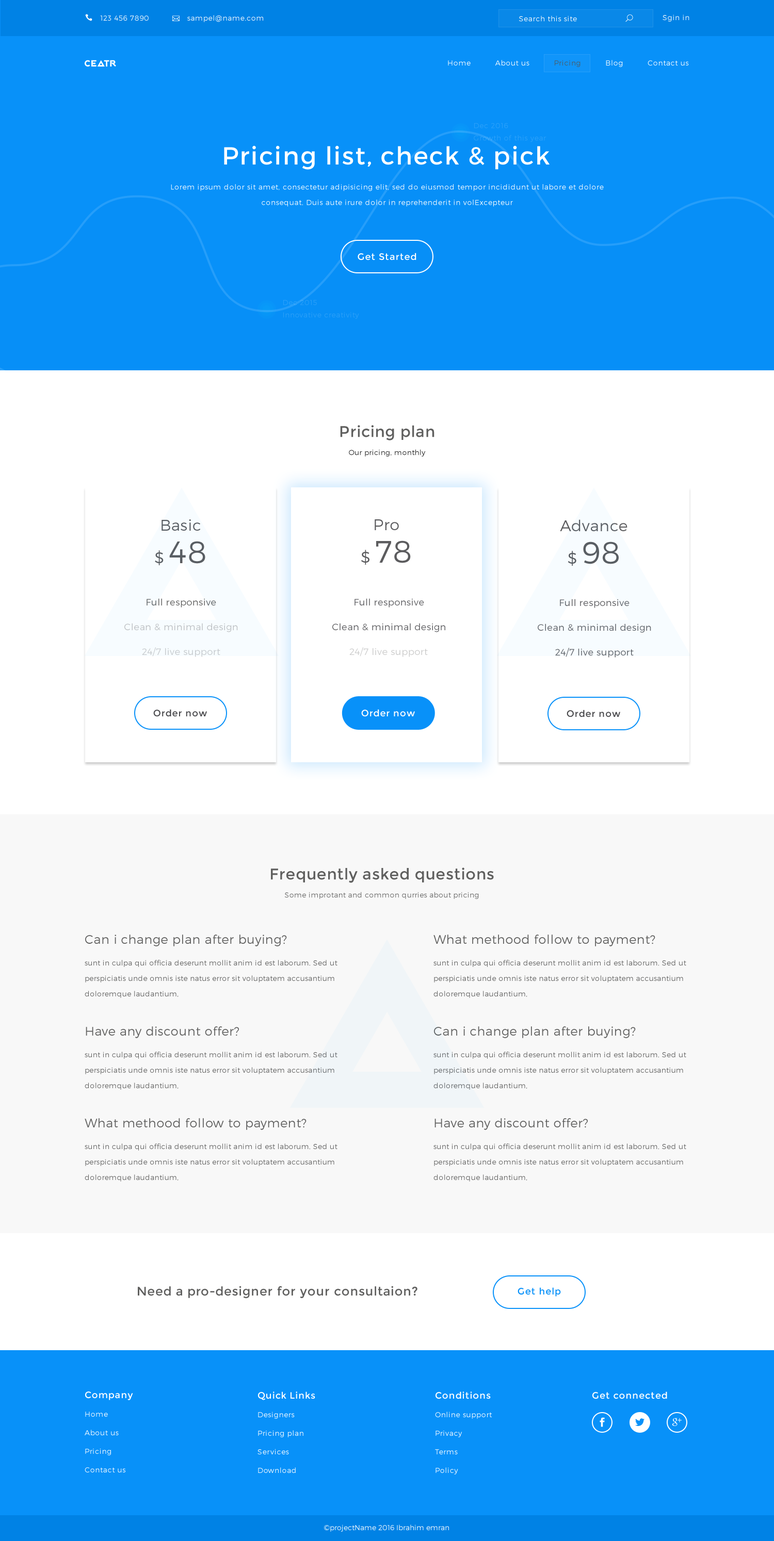
<style>
.page{position:relative;width:774px;height:1541px;background:#ffffff}
.page>*{position:absolute;margin:0}
.t1{font:7.2px "Montserrat-Light";letter-spacing:0.05em;color:#ffffff}
.t2{font:7.2px "ElegantIcons";letter-spacing:0.05em;color:#ffffff}
.t3{font:9.3px "JackFrost";letter-spacing:0.05em;color:#ffffff}
.t4{font:7.2px "Montserrat-Light";letter-spacing:0.05em;color:#fefefe}
.t5{font:7.2px "Montserrat-Light";letter-spacing:0.05em;color:#4e4e4d}
.t6{font:7.2px/12.4px "Montserrat-Light";letter-spacing:0.05em;color:#2da1fa}
.t7{font:24.8px "Montserrat-Regular";letter-spacing:0.05em;color:#ffffff}
.t8{font:7.2px/15.5px "Montserrat-Light";letter-spacing:0.05em;color:#ffffff}
.t9{font:9.3px "Montserrat-Regular";letter-spacing:0.05em;color:#ffffff}
.t10{font:7.2px/12.4px "Montserrat-Light";letter-spacing:0.05em;color:#2ca0f8}
.t11{font:15.5px "Montserrat-Regular";letter-spacing:0.025em;color:#4e4e4d}
.t12{font:7.2px "Montserrat-Light";letter-spacing:0.025em;color:#212121}
.t13{font:15.5px/32.5px "Montserrat-Light";letter-spacing:0.025em;color:#4a4a4d}
.t14{font:30.9px/32.5px "Montserrat-Light";letter-spacing:0.025em;color:#4a4a4d}
.t15{font:9.3px "Montserrat-Light";letter-spacing:0.025em;color:#656564}
.t16{font:9.3px/24.8px "Montserrat-Light";letter-spacing:0.025em;color:#4a4a4d}
.t17{font:9.3px/24.8px "Montserrat-Light";letter-spacing:0.025em;color:#5e6369}
.t18{font:9.3px "Montserrat-Light";letter-spacing:0.025em;color:#bec1c4}
.t19{font:9.3px "Montserrat-Light";letter-spacing:0.025em;color:#c6cacd}
.t20{font:9.3px "Montserrat-Light";letter-spacing:0.025em;color:#cccccc}
.t21{font:9.3px "Montserrat-Regular";letter-spacing:0.05em;color:#4a4a4d}
.t22{font:7.2px "Montserrat-Light";letter-spacing:0.025em;color:#4e4e4d}
.t23{font:7.2px/15.5px "Montserrat-Light";letter-spacing:0.025em;color:#4e4e4d}
.t24{font:12.4px/6.2px "Montserrat-Light";letter-spacing:0.025em;color:#4e4e4d}
.t25{font:12.4px "Montserrat-Regular";letter-spacing:0.025em;color:#4e4e4d}
.t26{font:9.3px "Montserrat-Regular";letter-spacing:0.05em;color:#0891f9}
.t27{font:7.2px/18.6px "Montserrat-Light";letter-spacing:0.05em;color:#ffffff}
.t28{font:9.3px/12.4px "Montserrat-Regular";letter-spacing:0.05em;color:#ffffff}
.t29{font:7.2px/9.3px "Montserrat-Light";letter-spacing:0.05em;color:#ffffff}
.t30{font:7.2px "Montserrat-Light";color:#ffffff}
.t31{font:7.2px "MicrosoftPhagsPa";color:#ffffff}
</style>
<div class="page">
<p class="t1" style="left:519px;top:14px;width:114px;height:8px">Search this site                    <span class="t2">U</span></p>
<p class="t1" style="left:662px;top:14px;width:27px;height:8px">Sgin in</p>
<p class="t3" style="left:85px;top:60px;width:31px;height:7px">ceatr</p>
<p class="t1" style="left:448px;top:60px;width:241px;height:7px"><span class="t4">Home          About us          </span><span class="t5">Pricing</span>          Blog          Contact us</p>
<p class="t6" style="left:474px;top:123px;width:72px;height:19px">Dec 2016<br>Growth of this year</p>
<p class="t7" style="left:224px;top:145px;width:325px;height:25px">Pricing list, check &amp; pick</p>
<p class="t8" style="left:171px;top:184px;width:432px;height:23px;text-align:center">Lorem ipsum dolor sit amet, consectetur adipisicing elit, sed do eiusmod tempor incididunt ut labore et dolore  consequat. Duis aute irure dolor in reprehenderit in volExcepteur</p>
<p class="t9" style="left:357px;top:253px;width:59px;height:7px">Get Started</p>
<p class="t10" style="left:283px;top:300px;width:76px;height:19px">Dec 2015<br>Innovative creativity</p>
<p class="t11" style="left:340px;top:425px;width:94px;height:15px;opacity:0.9">Pricing plan</p>
<p class="t12" style="left:349px;top:449px;width:77px;height:7px">Our pricing, monthly</p>
<p class="t13" style="left:155px;top:519px;width:50px;height:46px;text-align:center;opacity:0.9">Basic<br>$ <span class="t14">48</span></p>
<p class="t13" style="left:361px;top:519px;width:50px;height:46px;text-align:center;opacity:0.9">Pro<br>$ <span class="t14">78</span></p>
<p class="t13" style="left:560px;top:519px;width:67px;height:47px;text-align:center;opacity:0.9">Advance<br>$ <span class="t14">98</span></p>
<p class="t15" style="left:146px;top:598px;width:70px;height:10px">Full responsive</p>
<p class="t16" style="left:332px;top:598px;width:113px;height:34px;text-align:center;opacity:0.87">Full responsive<br>Clean &amp; minimal design</p>
<p class="t17" style="left:537px;top:599px;width:114px;height:59px;text-align:center">Full responsive<br>Clean &amp; minimal design<br>24/7 live support</p>
<p class="t18" style="left:124px;top:623px;width:114px;height:9px">Clean &amp; minimal design</p>
<p class="t19" style="left:142px;top:647px;width:78px;height:10px">24/7 live support</p>
<p class="t20" style="left:349px;top:647px;width:79px;height:10px">24/7 live support</p>
<p class="t21" style="left:153px;top:709px;width:54px;height:8px">Order now</p>
<p class="t9" style="left:361px;top:709px;width:54px;height:8px">Order now</p>
<p class="t21" style="left:566px;top:710px;width:54px;height:7px">Order now</p>
<p class="t11" style="left:271px;top:868px;width:223px;height:15px;opacity:0.9">Frequently asked questions</p>
<p class="t22" style="left:285px;top:892px;width:194px;height:7px;opacity:0.87">Some improtant and common qurries about pricing</p>
<p class="t23" style="left:85px;top:935px;width:252px;height:63px;opacity:0.9"><span class="t24">Can i change plan after buying?<br><br></span>sunt in culpa qui officia deserunt mollit anim id est laborum. Sed ut <br>perspiciatis unde omnis iste natus error sit voluptatem accusantium<br>doloremque laudantium,</p>
<p class="t23" style="left:433px;top:935px;width:253px;height:63px;opacity:0.9"><span class="t24">What methood follow to payment?<br><br></span>sunt in culpa qui officia deserunt mollit anim id est laborum. Sed ut <br>perspiciatis unde omnis iste natus error sit voluptatem accusantium<br>doloremque laudantium,</p>
<p class="t23" style="left:85px;top:1026px;width:252px;height:64px;opacity:0.9"><span class="t24">Have any discount offer?<br><br></span>sunt in culpa qui officia deserunt mollit anim id est laborum. Sed ut <br>perspiciatis unde omnis iste natus error sit voluptatem accusantium<br>doloremque laudantium,</p>
<p class="t23" style="left:433px;top:1026px;width:253px;height:64px;opacity:0.9"><span class="t24">Can i change plan after buying?<br><br></span>sunt in culpa qui officia deserunt mollit anim id est laborum. Sed ut <br>perspiciatis unde omnis iste natus error sit voluptatem accusantium<br>doloremque laudantium,</p>
<p class="t23" style="left:85px;top:1118px;width:252px;height:64px;opacity:0.9"><span class="t24">What methood follow to payment?<br><br></span>sunt in culpa qui officia deserunt mollit anim id est laborum. Sed ut <br>perspiciatis unde omnis iste natus error sit voluptatem accusantium<br>doloremque laudantium,</p>
<p class="t23" style="left:433px;top:1118px;width:253px;height:64px;opacity:0.9"><span class="t24">Have any discount offer?<br><br></span>sunt in culpa qui officia deserunt mollit anim id est laborum. Sed ut <br>perspiciatis unde omnis iste natus error sit voluptatem accusantium<br>doloremque laudantium,</p>
<p class="t25" style="left:138px;top:1286px;width:279px;height:13px;opacity:0.9">Need a pro-designer for your consultaion?</p>
<p class="t26" style="left:517px;top:1287px;width:44px;height:10px">Get help</p>
<p class="t27" style="left:85px;top:1392px;width:48px;height:81px"><span class="t28">Company<br><br></span><span class="t29">Home<br></span>About us<br>Pricing<br>Contact us</p>
<p class="t27" style="left:257px;top:1392px;width:58px;height:81px"><span class="t28">Quick Links<br><br></span><span class="t29">Designers<br></span>Pricing plan<br>Services<br>Download</p>
<p class="t27" style="left:435px;top:1392px;width:57px;height:83px"><span class="t28">Conditions<br><br></span><span class="t29">Online support<br></span>Privacy<br>Terms<br>Policy</p>
<p class="t9" style="left:592px;top:1392px;width:75px;height:7px">Get connected</p>
<p class="t30" style="left:324px;top:1525px;width:125px;height:7px"><span class="t31">©</span>projectName 2016 Ibrahim emran</p>
</div>
